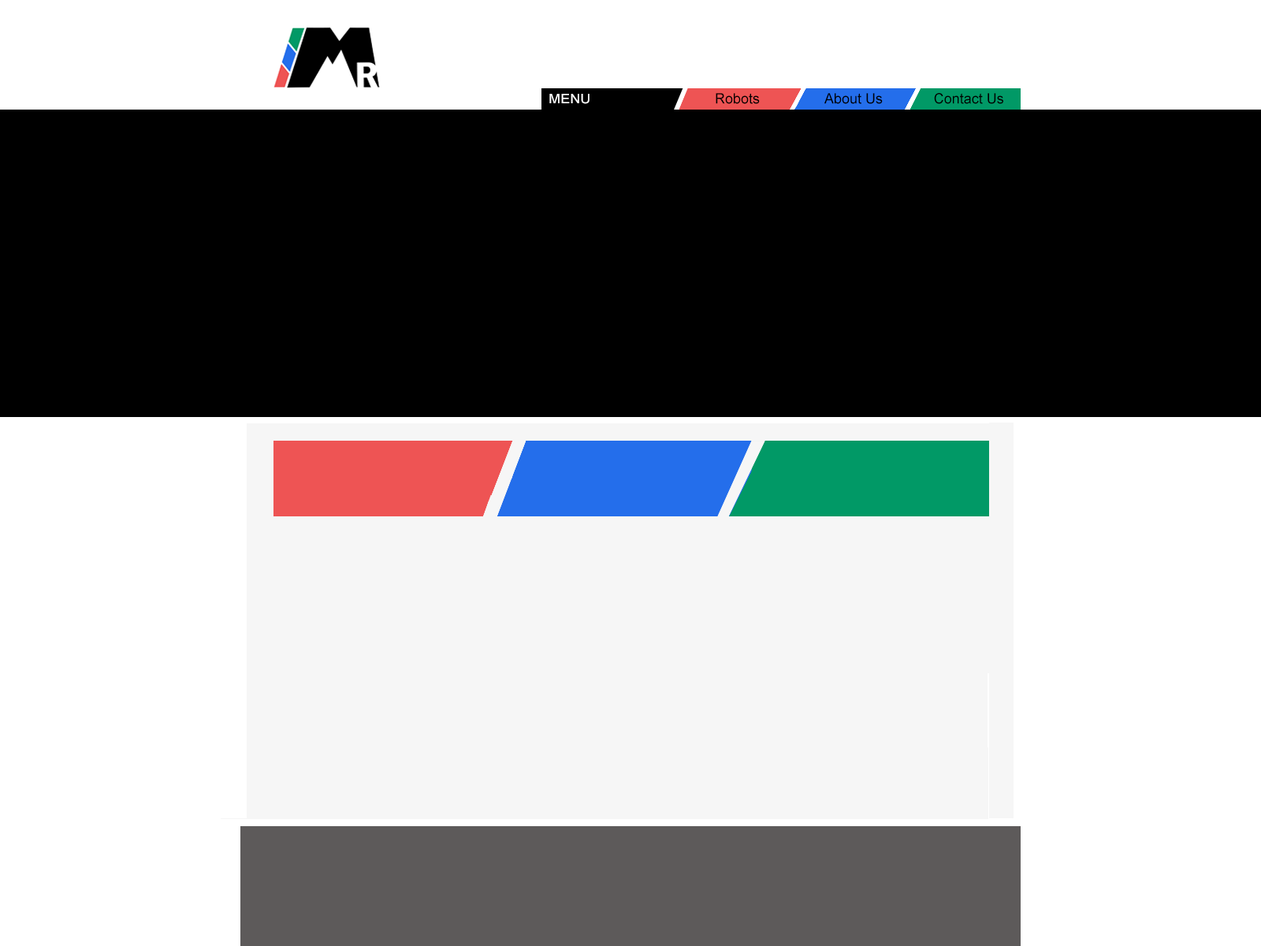
<style>
.page{position:relative;width:1261px;height:946px;background:#ffffff}
.page>*{position:absolute;margin:0}
.t1{font:13.3px "ArialMT";color:#ffffff;scale:1.07 1}
.t2{font:14.2px "ArialMT";color:#000000}
</style>
<div class="page">
<p class="t1" style="left:549px;top:94px;width:40px;height:10px">MENU</p>
<p class="t2" style="left:716px;top:93px;width:44px;height:11px">Robots</p>
<p class="t2" style="left:824px;top:93px;width:59px;height:11px">About Us</p>
<p class="t2" style="left:934px;top:93px;width:69px;height:11px">Contact Us</p>
</div>
